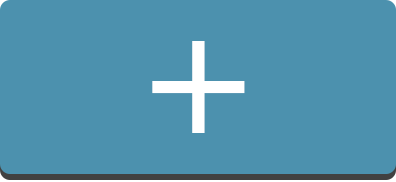
<style>
.page{position:relative;width:396px;height:182px;background:#4c91ae}
.page>*{position:absolute;margin:0}
.t1{font:150px "Verdana";color:#ffffff}
</style>
<div class="page">
<p class="t1" style="left:152px;top:41px;width:93px;height:92px">+</p>
</div>
